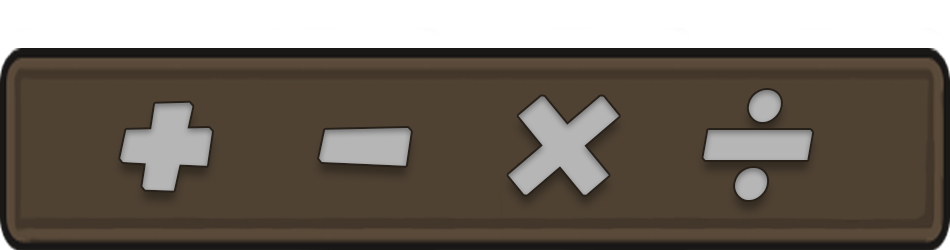
<style>
.page{position:relative;width:950px;height:250px;background:#4f4233}
.page>*{position:absolute;margin:0}
.t1{font:304.2px "Boulder";letter-spacing:-0.025em;color:#b6b6b6;font-weight:bold;font-style:italic}
.t2{font:200px "ArialRoundedMTBold";letter-spacing:-0.025em;color:#b6b6b6;font-weight:bold;font-style:italic}
</style>
<div class="page">
<p class="t1" style="left:120px;top:102px;width:291px;height:89px">+ -</p>
<p class="t2" style="left:508px;top:90px;width:305px;height:110px">× ÷</p>
</div>
